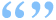
<style>
.page{position:relative;width:56px;height:20px;background:#ffffff}
.page>*{position:absolute;margin:0}
.t1{font:72px "DFKaiShu-SB-Estd-BF";color:#84c1fa}
</style>
<div class="page">
<p class="t1" style="left:2px;top:1px;width:23px;height:17px">“</p>
<p class="t1" style="left:31px;top:1px;width:23px;height:17px">”</p>
</div>
